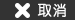
<style>
.page{position:relative;width:75px;height:20px;background:#333333}
.page>*{position:absolute;margin:0}
.t1{font:14px "YouYuan";letter-spacing:0.06em;color:#ffffff;font-weight:bold}
</style>
<div class="page">
<p class="t1" style="left:37px;top:3px;width:29px;height:14px">取消</p>
</div>
